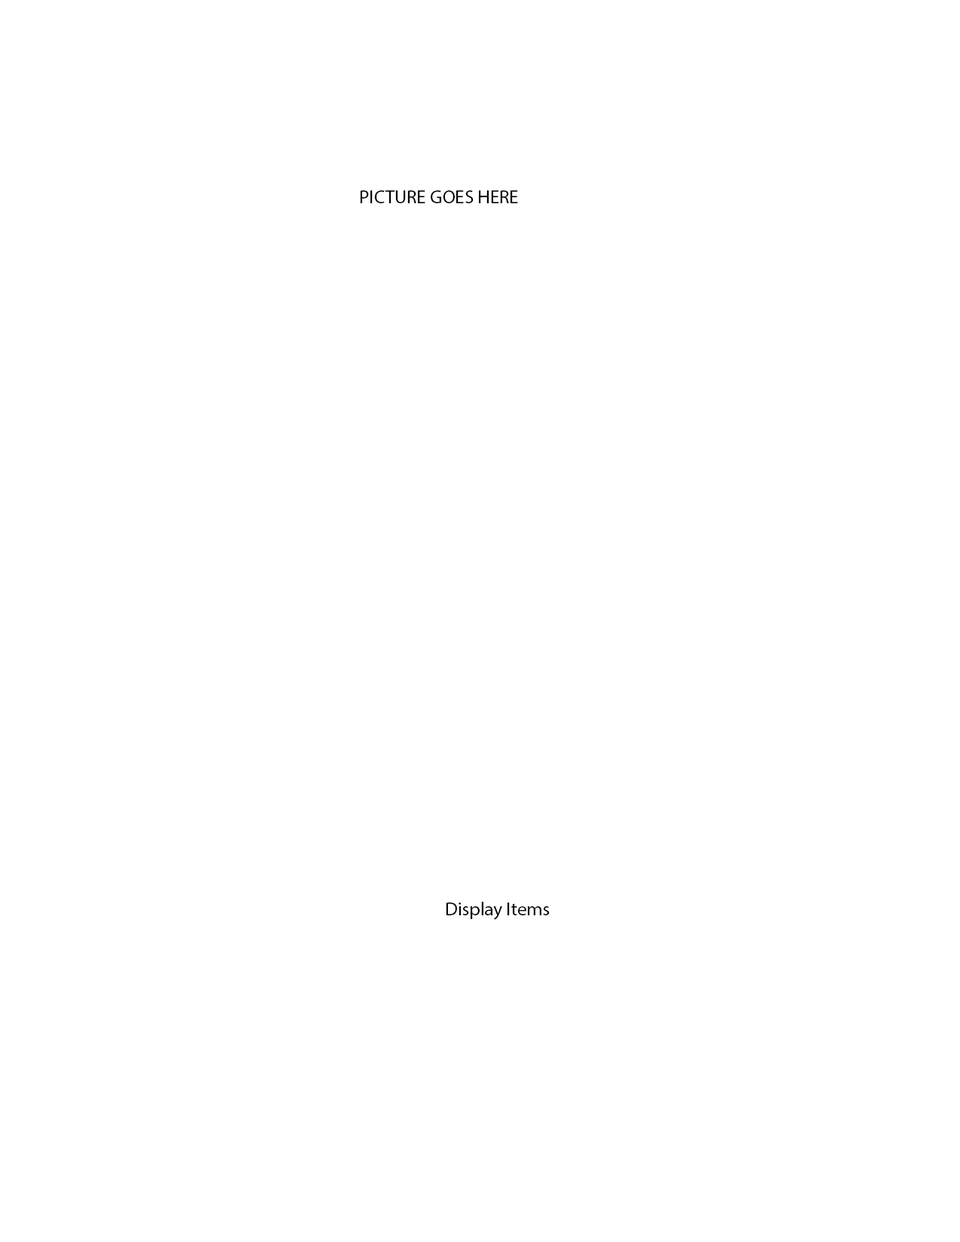
<style>
.page{position:relative;width:960px;height:1242px;background:#ffffff}
.page>*{position:absolute;margin:0}
.t1{font:9px "MyriadPro-Regular";color:#000000}
</style>
<div class="page">
<p class="t1" style="left:360px;top:190px;width:158px;height:13px">PICTURE GOES HERE</p>
<p class="t1" style="left:446px;top:902px;width:104px;height:18px">Display Items</p>
</div>
